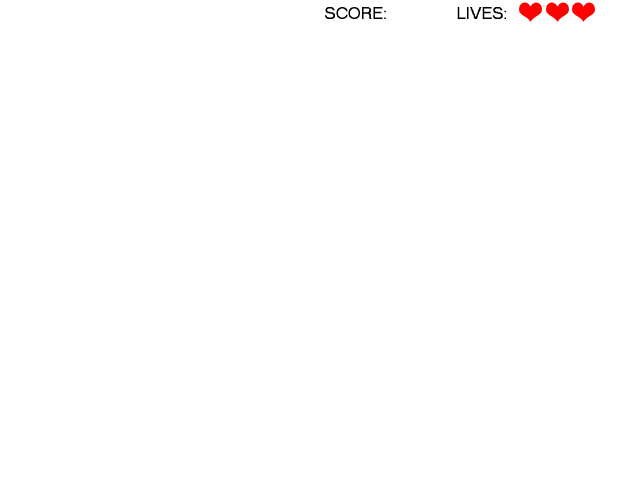
<style>
.page{position:relative;width:640px;height:480px;background:#ffffff}
.page>*{position:absolute;margin:0}
.t1{font:16.7px "MS Sans Serif";color:#000000}
</style>
<div class="page">
<p class="t1" style="left:325px;top:7px;width:61px;height:12px">SCORE:</p>
<p class="t1" style="left:457px;top:7px;width:49px;height:12px">LIVES:</p>
</div>
